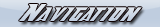
<style>
.page{position:relative;width:160px;height:27px}
.page>*{position:absolute;margin:0}
.t1{font:28.8px "Abberancy";color:#bfcddf}
</style>
<div class="page">
<p class="t1" style="left:19px;top:4px;width:123px;height:17px">Navigation</p>
</div>
